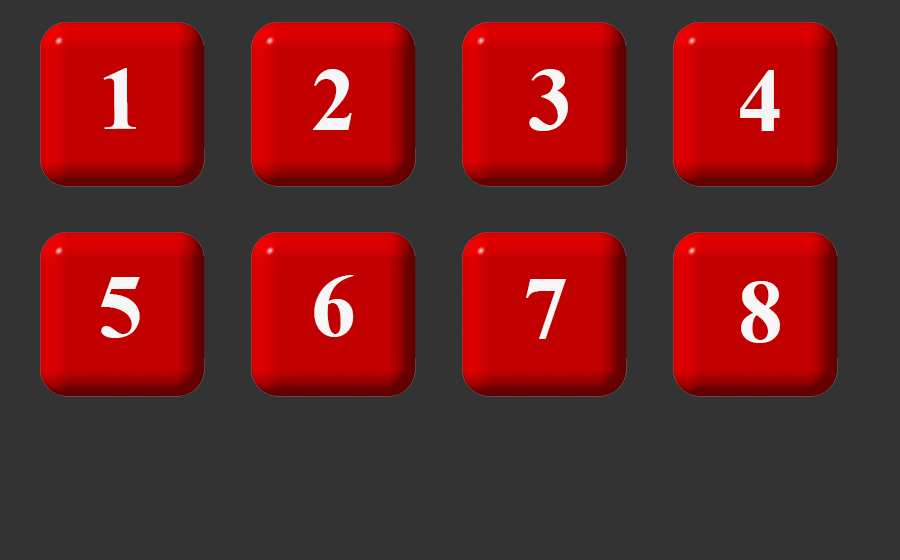
<style>
.page{position:relative;width:900px;height:560px;background:#333333}
.page>*{position:absolute;margin:0}
.t1{font:90px "TimesNewRomanPS-BoldMT";color:#f6f6f6}
</style>
<div class="page">
<p class="t1" style="left:103px;top:68px;width:33px;height:61px">1</p>
<p class="t1" style="left:313px;top:69px;width:39px;height:61px">2</p>
<p class="t1" style="left:529px;top:69px;width:39px;height:62px">3</p>
<p class="t1" style="left:740px;top:70px;width:40px;height:61px">4</p>
<p class="t1" style="left:101px;top:277px;width:39px;height:61px">5</p>
<p class="t1" style="left:314px;top:275px;width:40px;height:62px">6</p>
<p class="t1" style="left:526px;top:279px;width:40px;height:60px">7</p>
<p class="t1" style="left:741px;top:281px;width:39px;height:62px">8</p>
</div>
